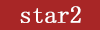
<style>
.page{position:relative;width:100px;height:30px;background:#a82626}
.page>*{position:absolute;margin:0}
.t1{font:24px "SimSun";color:#ffffff;font-weight:bold}
</style>
<div class="page">
<p class="t1" style="left:20px;top:6px;width:61px;height:17px">star2</p>
</div>
